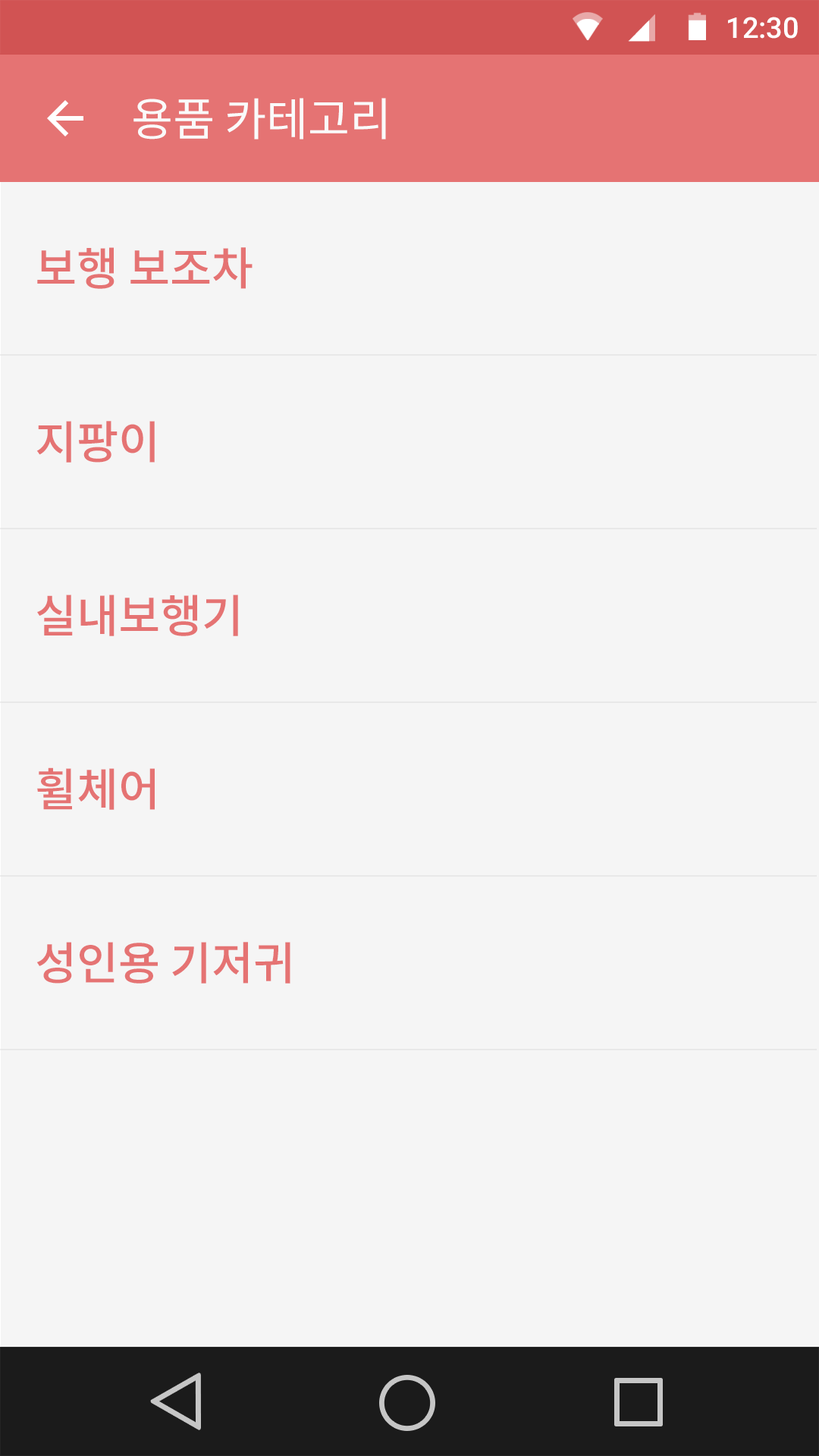
<style>
.page{position:relative;width:819px;height:1456px;background:#f5f5f5}
.page>*{position:absolute;margin:0}
.t1{font:28.8px "Roboto-Medium";color:#ffffff}
.t2{font:45.5px "NotoSansCJKkr-Regular";letter-spacing:-0.005em;color:#fafafa}
.t3{font:45.5px "NotoSansCJKkr-Medium";letter-spacing:-0.005em;color:#e57373}
</style>
<div class="page">
<p class="t1" style="left:728px;top:17px;width:70px;height:22px">12:30</p>
<p class="t2" style="left:133px;top:98px;width:253px;height:42px">용품 카테고리</p>
<p class="t3" style="left:37px;top:247px;width:216px;height:42px">보행 보조차</p>
<p class="t3" style="left:36px;top:421px;width:119px;height:42px">지팡이</p>
<p class="t3" style="left:37px;top:595px;width:201px;height:41px">실내보행기</p>
<p class="t3" style="left:37px;top:767px;width:118px;height:43px">휠체어</p>
<p class="t3" style="left:36px;top:942px;width:254px;height:42px">성인용 기저귀</p>
</div>
